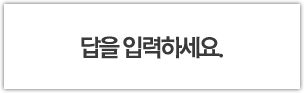
<style>
.page{position:relative;width:304px;height:93px;background:#ffffff}
.page>*{position:absolute;margin:0}
.t1{font:24px "RixMGoB";letter-spacing:-0.1em;color:#3a3a3a}
</style>
<div class="page">
<p class="t1" style="left:81px;top:36px;width:142px;height:23px">답을 입력하세요.</p>
</div>
